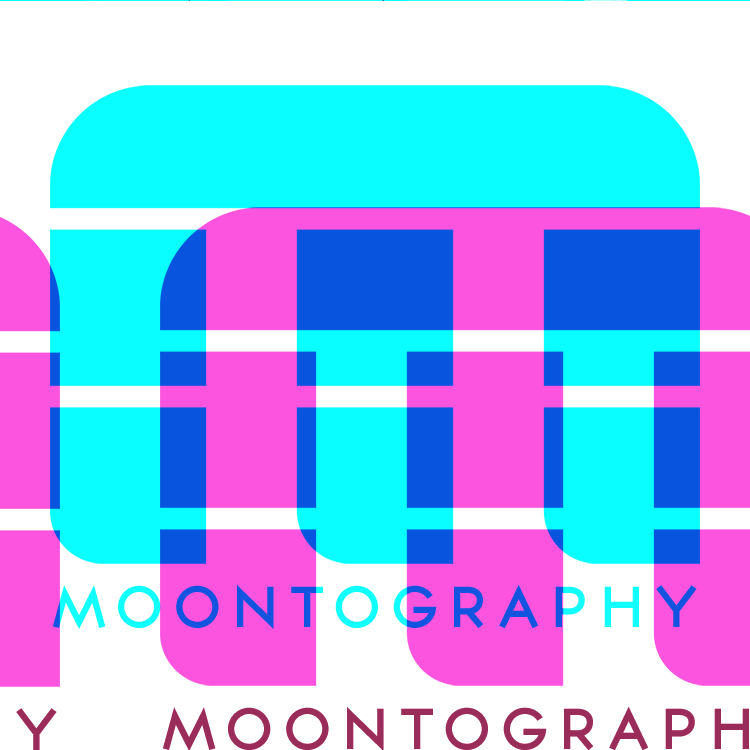
<style>
.page{position:relative;width:750px;height:750px;background:#ffffff}
.page>*{position:absolute;margin:0}
.t1{font:52.1px "TYPOGRAPHPRO-SemiBold";letter-spacing:0.2em}
</style>
<div class="page">
<p class="t1" style="left:53px;top:583px;width:644px;height:45px">MOONTOGRAPHY</p>
</div>
